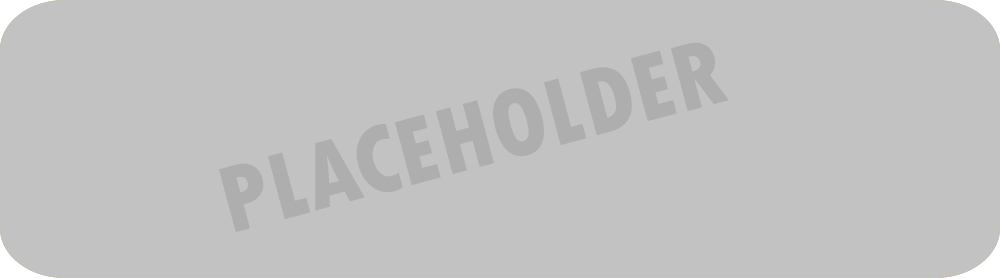
<style>
.page{position:relative;width:1000px;height:278px;background:#c2c2c2}
.page>*{position:absolute;margin:0}
.t1{font:100px "TwCenMT-CondensedExtraBold";color:#aeaeae}
</style>
<div class="page">
<p class="t1" style="left:219px;top:42px;width:510px;height:191px;rotate:-15deg">PLACEHOLDER</p>
</div>
